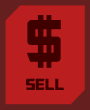
<style>
.page{position:relative;width:90px;height:110px;background:#ba1e1e}
.page>*{position:absolute;margin:0}
.t1{font:18px "TransformersMovie";letter-spacing:0.02em;color:#400000}
</style>
<div class="page">
<p class="t1" style="left:26px;top:78px;width:38px;height:12px">sell</p>
</div>
